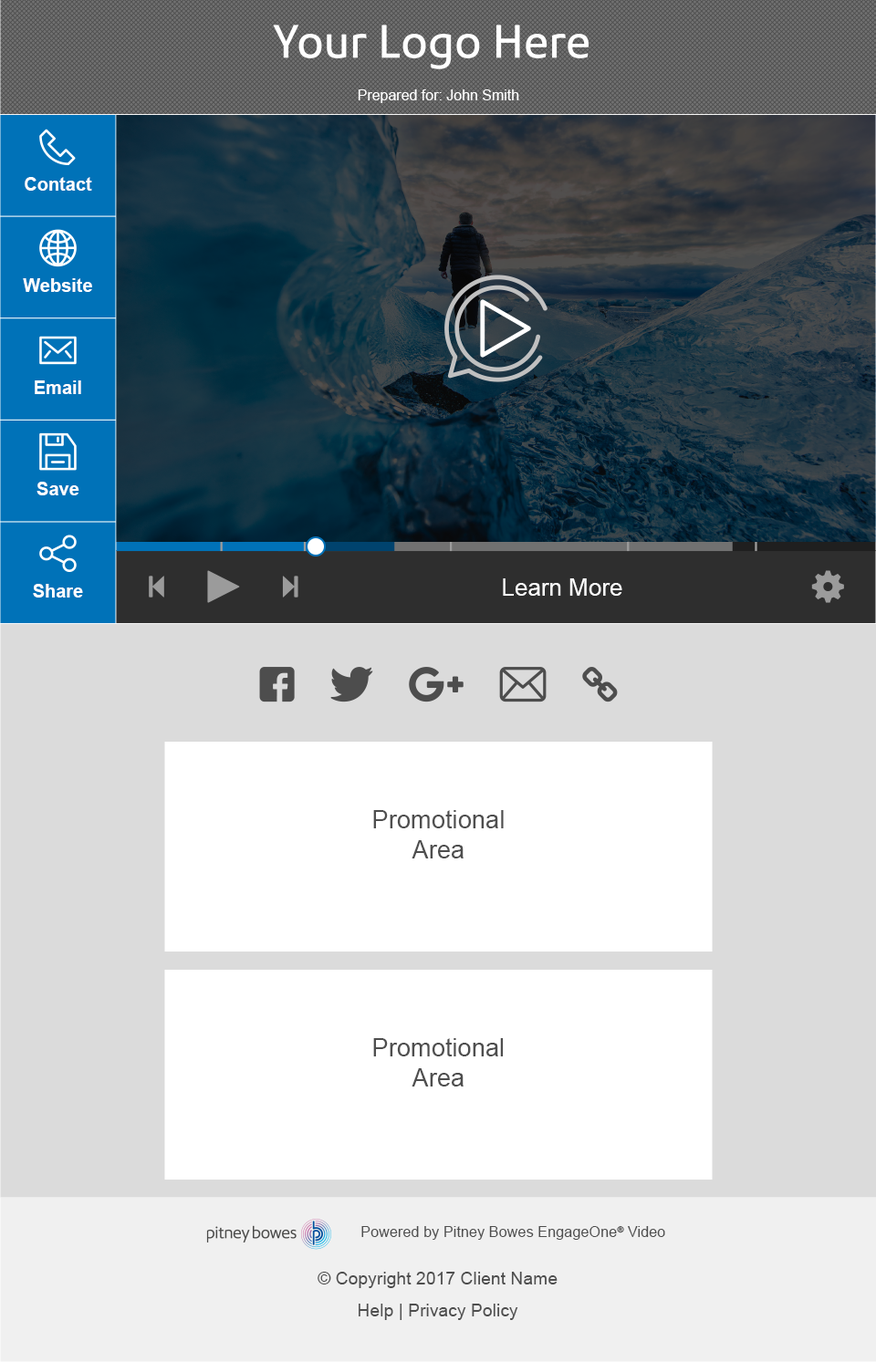
<style>
.page{position:relative;width:876px;height:1362px;background:#dbdbdb}
.page>*{position:absolute;margin:0}
.t1{font:14.6px "ArialMT";color:#ffffff}
.t2{font:18.2px "Arial-BoldMT";color:#ffffff}
.t3{font:23.7px "ArialMT";color:#ffffff}
.t4{font:24.9px "ArialMT";color:#4e4e4e}
.t5{font:14.9px "ArialMT";color:#4e4e4e}
.t6{font:17.6px "ArialMT";color:#4e4e4e}
</style>
<div class="page">
<p class="t1" style="left:358px;top:89px;width:161px;height:14px">Prepared for: John Smith</p>
<p class="t2" style="left:25px;top:177px;width:67px;height:14px">Contact</p>
<p class="t2" style="left:23px;top:278px;width:69px;height:14px">Website</p>
<p class="t2" style="left:35px;top:380px;width:46px;height:14px">Email</p>
<p class="t2" style="left:36px;top:482px;width:43px;height:13px">Save</p>
<p class="t3" style="left:503px;top:578px;width:119px;height:18px">Learn More</p>
<p class="t2" style="left:33px;top:584px;width:50px;height:13px">Share</p>
<p class="t4" style="left:373px;top:810px;width:130px;height:48px;text-align:center">Promotional <br>Area</p>
<p class="t4" style="left:373px;top:1038px;width:130px;height:48px;text-align:center">Promotional <br>Area</p>
<p class="t5" style="left:361px;top:1226px;width:304px;height:14px">Powered by Pitney Bowes EngageOne® Video</p>
<p class="t6" style="left:317px;top:1271px;width:240px;height:17px">© Copyright 2017 Client Name</p>
<p class="t6" style="left:358px;top:1303px;width:160px;height:17px">Help | Privacy Policy</p>
</div>
